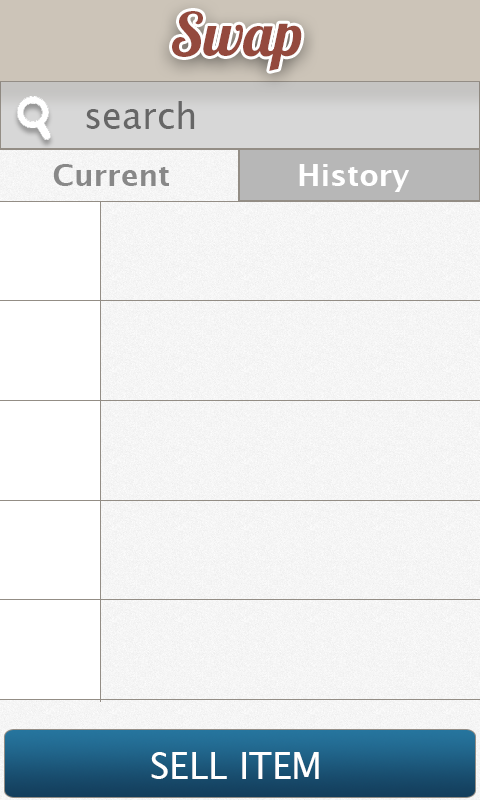
<style>
.page{position:relative;width:480px;height:800px}
.page>*{position:absolute;margin:0}
.t1{font:60px "Lobster1.4";color:#94493d}
.t2{font:36px "LucidaGrande";color:#666666}
.t3{font:30px "LucidaGrande-Bold";color:#888888}
.t4{font:30px "LucidaGrande-Bold";color:#ffffff}
.t5{font:36px "LucidaGrande";color:#ffffff}
</style>
<div class="page">
<p class="t1" style="left:172px;top:11px;width:130px;height:60px">Swap</p>
<p class="t2" style="left:86px;top:101px;width:109px;height:28px">search</p>
<p class="t3" style="left:53px;top:164px;width:116px;height:22px">Current</p>
<p class="t4" style="left:299px;top:164px;width:110px;height:28px">History</p>
<p class="t5" style="left:151px;top:752px;width:168px;height:27px">SELL ITEM</p>
</div>
